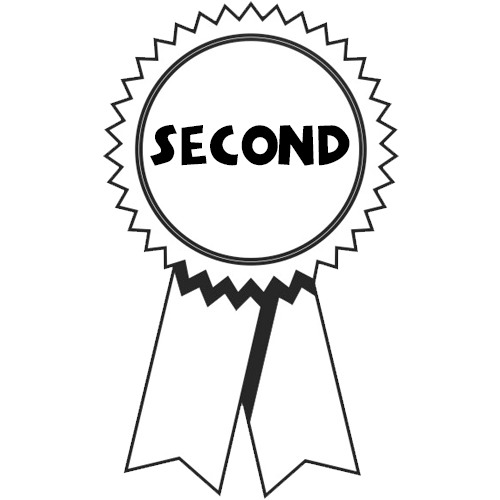
<style>
.page{position:relative;width:500px;height:500px;background:#ffffff}
.page>*{position:absolute;margin:0}
.t1{font:51.9px "THEMINION";color:#000000}
</style>
<div class="page">
<p class="t1" style="left:150px;top:124px;width:200px;height:42px">Second</p>
</div>
